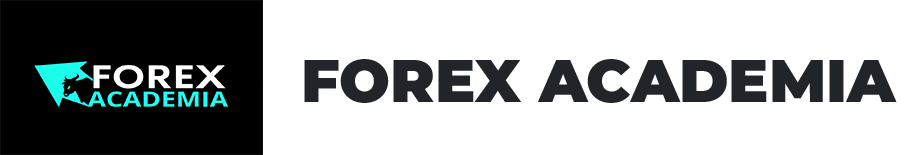
<style>
.page{position:relative;width:909px;height:155px;background:#ffffff}
.page>*{position:absolute;margin:0}
.t1{font:60px "Montserrat-Black";color:#212529}
</style>
<div class="page">
<p class="t1" style="left:304px;top:59px;width:593px;height:44px">FOREX ACADEMIA</p>
</div>
